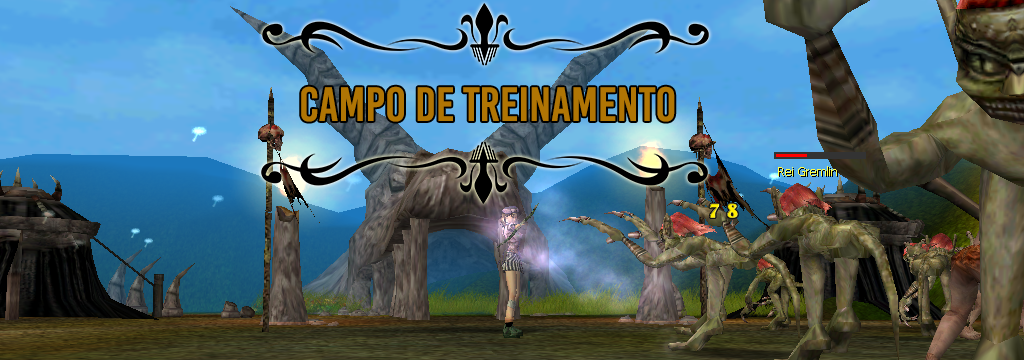
<style>
.page{position:relative;width:1024px;height:360px}
.page>*{position:absolute;margin:0}
.t1{font:48px "BebasKai";color:#b07504}
</style>
<div class="page">
<p class="t1" style="left:301px;top:86px;width:374px;height:36px">CAMPO DE TREINAMENTO</p>
</div>
